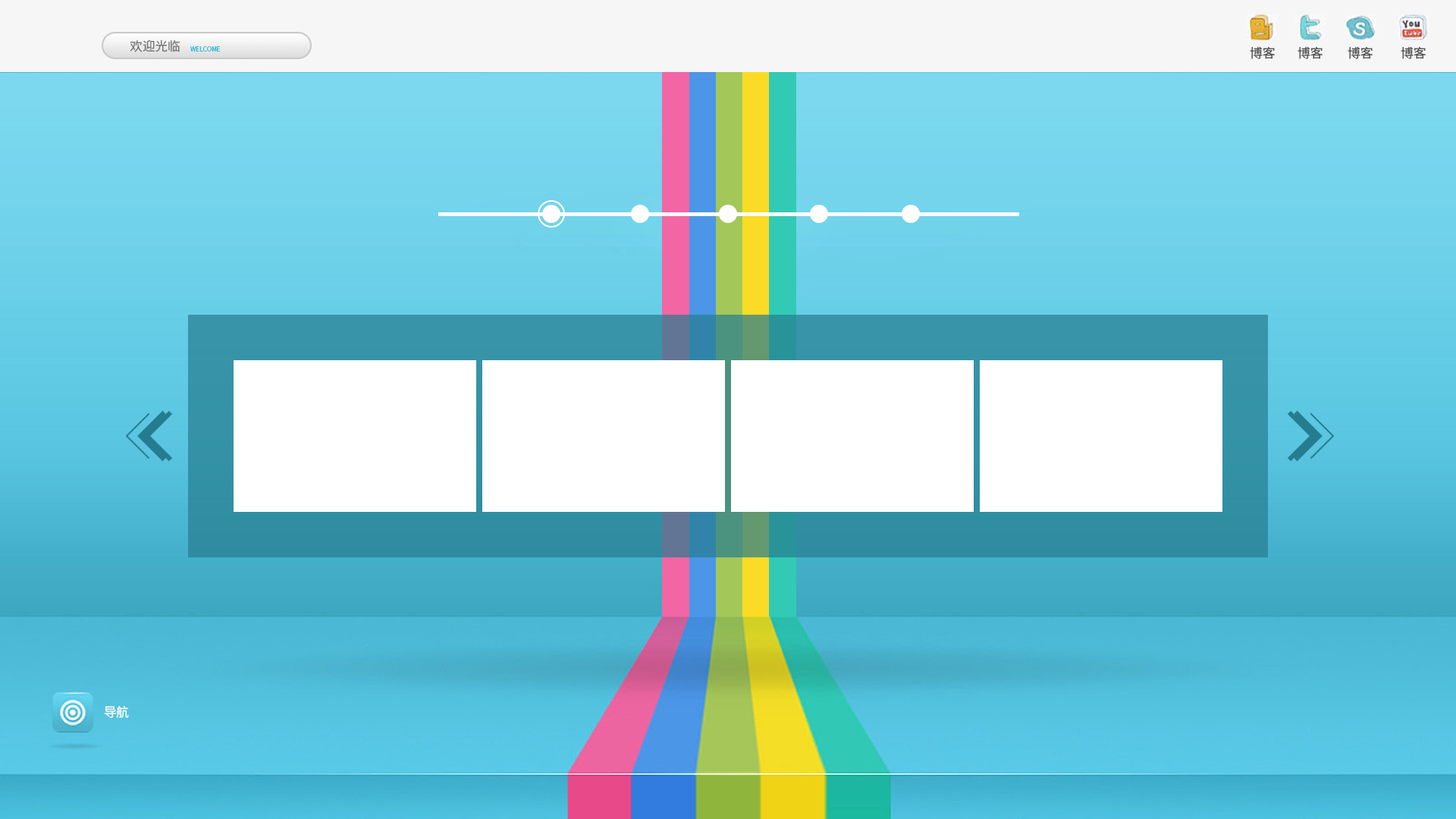
<style>
.page{position:relative;width:1456px;height:819px}
.page>*{position:absolute;margin:0}
.t1{font:12.6px "SourceHanSansCN-Regular";color:#767676}
.t2{font:6.3px "SourceHanSansCN-Regular";color:#32b8d3}
.t3{font:12.6px "SourceHanSansCN-Regular";color:#505050}
.t4{font:12.6px "SourceHanSansCN-Regular";color:#ffffff}
</style>
<div class="page">
<p class="t1" style="left:130px;top:39px;width:50px;height:13px">欢迎光临</p>
<p class="t2" style="left:190px;top:46px;width:30px;height:6px">WELCOME</p>
<p class="t3" style="left:1250px;top:46px;width:25px;height:13px">博客</p>
<p class="t3" style="left:1297px;top:46px;width:26px;height:13px">博客</p>
<p class="t3" style="left:1348px;top:46px;width:25px;height:13px">博客</p>
<p class="t3" style="left:1401px;top:46px;width:25px;height:13px">博客</p>
<p class="t4" style="left:104px;top:705px;width:25px;height:13px">导航</p>
</div>
